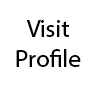
<style>
.page{position:relative;width:100px;height:100px;background:#ffffff}
.page>*{position:absolute;margin:0}
.t1{font:25px "MyriadHebrew-Regular";color:#000000}
</style>
<div class="page">
<p class="t1" style="left:16px;top:20px;width:65px;height:47px;text-align:center">Visit <br>Profile</p>
</div>
